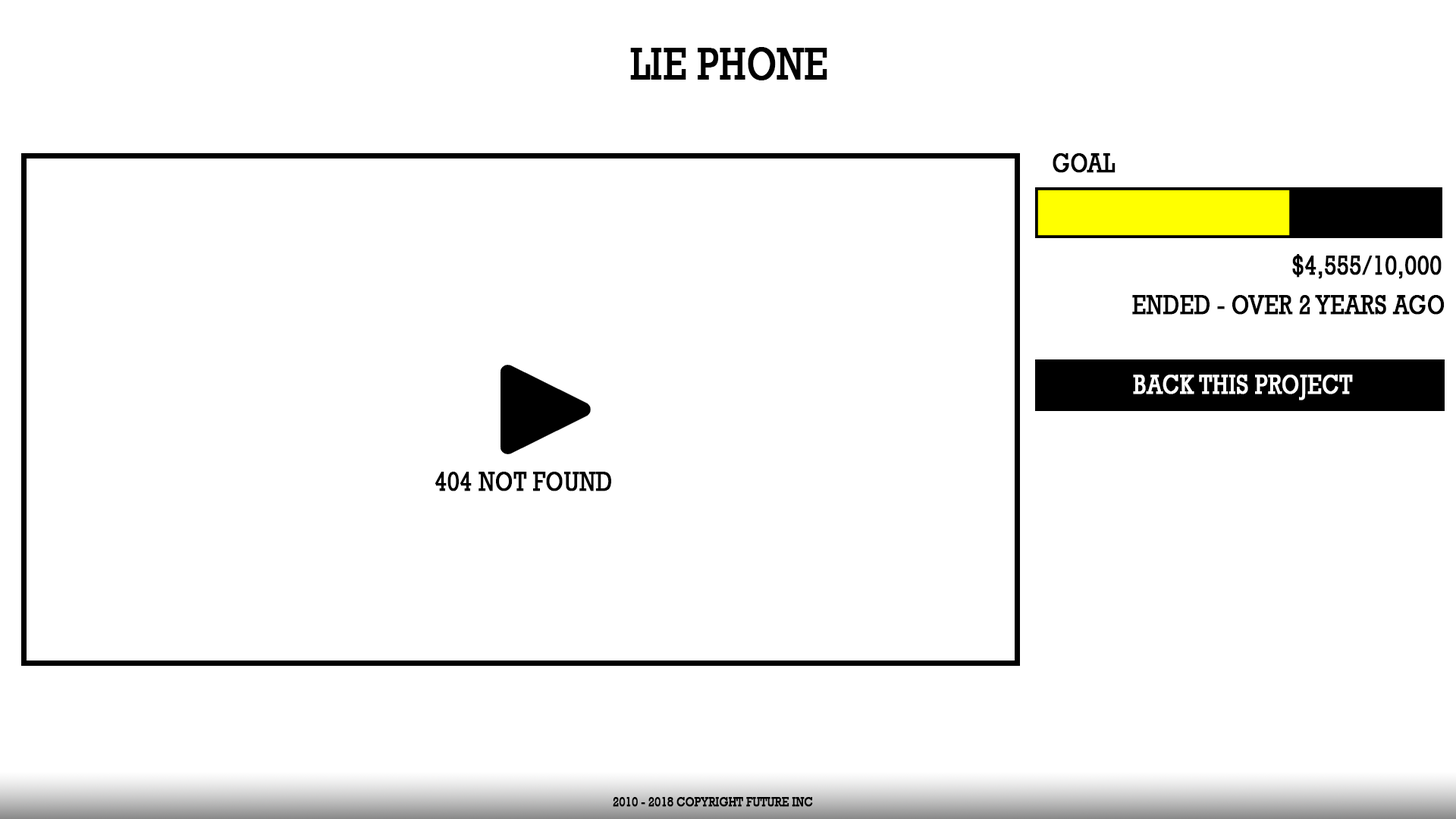
<style>
.page{position:relative;width:1456px;height:819px;background:#ffffff}
.page>*{position:absolute;margin:0}
.t1{font:45.5px "Rockwell";color:#000000;font-weight:bold;scale:0.81 1}
.t2{font:27.3px "Rockwell";color:#000000;font-weight:bold;scale:0.81 1}
.t3{font:27.3px "Rockwell";color:#ffffff;font-weight:bold;scale:0.81 1}
.t4{font:13.6px "Rockwell";color:#000000;font-weight:bold;scale:0.81 1}
</style>
<div class="page">
<p class="t1" style="left:630px;top:47px;width:197px;height:33px">LIE PHONE</p>
<p class="t2" style="left:1053px;top:153px;width:62px;height:20px">GOAL</p>
<p class="t2" style="left:1292px;top:254px;width:150px;height:25px">$4,555/10,000</p>
<p class="t2" style="left:1132px;top:295px;width:313px;height:20px">ENDED - OVER 2 YEARS AGO</p>
<p class="t3" style="left:1133px;top:375px;width:220px;height:25px">BACK THIS PROJECT</p>
<p class="t2" style="left:435px;top:472px;width:176px;height:19px">404 NOT FOUND</p>
<p class="t4" style="left:613px;top:797px;width:200px;height:10px">2010 - 2018 COPYRIGHT FUTURE INC</p>
</div>
